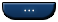
<style>
.page{position:relative;width:58px;height:22px;background:#ffffff}
.page>*{position:absolute;margin:0}
.t1{font:14px "CalistoMT";color:#ffffff;scale:1.03 1}
</style>
<div class="page">
<p class="t1" style="left:24px;top:9px;width:10px;height:3px">...</p>
</div>
